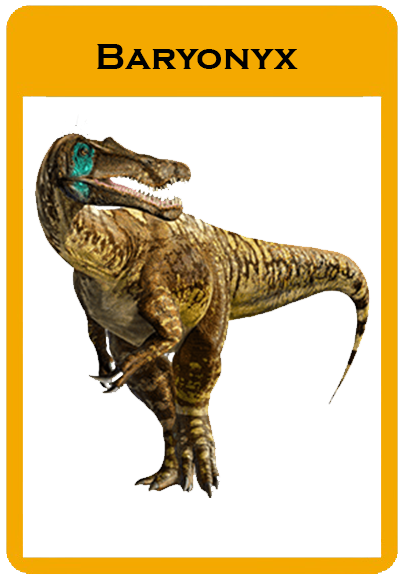
<style>
.page{position:relative;width:400px;height:575px;background:#ffffff}
.page>*{position:absolute;margin:0}
.t1{font:37.3px "CopperplateGothic-Bold";color:#000000}
</style>
<div class="page">
<p class="t1" style="left:97px;top:44px;width:201px;height:25px">Baryonyx</p>
</div>
